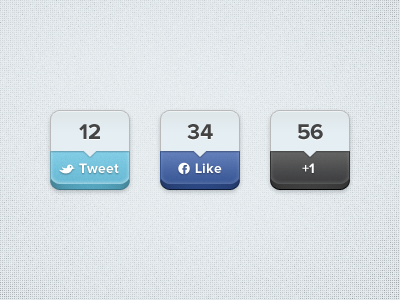
<style>
.page{position:relative;width:400px;height:300px}
.page>*{position:absolute;margin:0}
.t1{font:22px "ProximaNova-Bold";color:#444444}
.t2{font:14px "ProximaNova-Bold";color:#ffffff}
</style>
<div class="page">
<p class="t1" style="left:79px;top:124px;width:21px;height:15px">12</p>
<p class="t1" style="left:187px;top:124px;width:26px;height:16px">34</p>
<p class="t1" style="left:298px;top:124px;width:25px;height:16px">56</p>
<p class="t2" style="left:79px;top:163px;width:40px;height:10px">Tweet</p>
<p class="t2" style="left:195px;top:163px;width:27px;height:10px">Like</p>
<p class="t2" style="left:302px;top:163px;width:12px;height:10px">+1</p>
</div>
